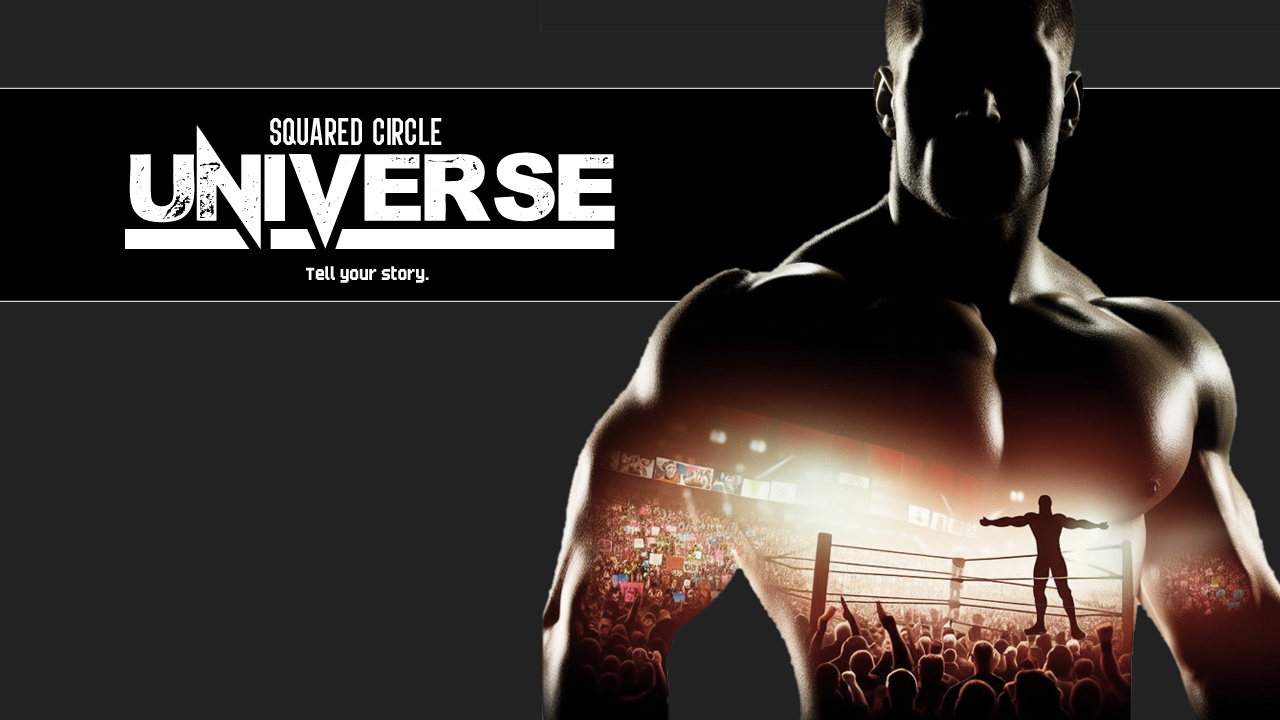
<style>
.page{position:relative;width:1280px;height:720px;background:#222222}
.page>*{position:absolute;margin:0}
.t1{font:142.3px "MPonderosa";color:#ffffff;text-transform:uppercase}
.t2{font:39.8px "SPORTVIPER";color:#ffffff}
.t3{font:22px "Born2bSportyFS";color:#ffffff}
</style>
<div class="page">
<p class="t1" style="left:129px;top:125px;width:486px;height:124px">Universe</p>
<p class="t2" style="left:270px;top:118px;width:172px;height:28px">squared circle</p>
<p class="t3" style="left:306px;top:266px;width:123px;height:17px">Tell your story.</p>
</div>
